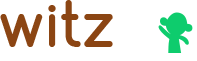
<style>
.page{position:relative;width:197px;height:61px;background:#ffffff}
.page>*{position:absolute;margin:0}
.t1{font:60px "Comfortaa-Bold";color:#8b4513}
.t2{font:60px "Comfortaa-Bold";color:#ffffff}
</style>
<div class="page">
<p class="t1" style="left:0px;top:0px;width:149px;height:61px">witz<span class="t2">g</span></p>
</div>
